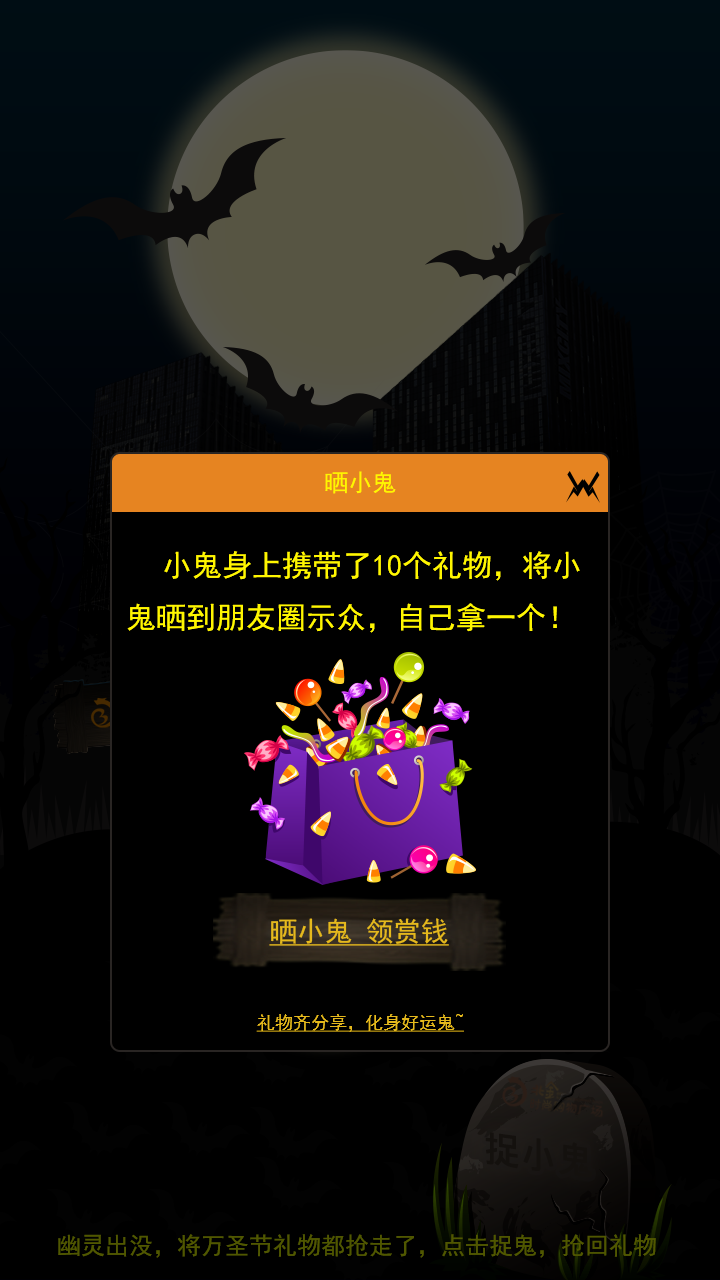
<style>
.page{position:relative;width:720px;height:1280px;background:#000000}
.page>*{position:absolute;margin:0}
.t1{font:24px "SimHei";color:#fff600}
.t2{font:30px "SimHei";color:#fff600}
.t3{font:27.6px "SimHei";color:#e5b91d;text-decoration:underline}
.t4{font:18px "SimHei";color:#e5b91d;text-decoration:underline}
</style>
<div class="page">
<p class="t1" style="left:325px;top:471px;width:71px;height:23px">晒小鬼</p>
<p class="t2" style="left:127px;top:551px;width:453px;height:82px">小鬼身上携带了10个礼物，将小鬼晒到朋友圈示众，自己拿一个！</p>
<p class="t3" style="left:269px;top:918px;width:180px;height:28px">晒小鬼 领赏钱</p>
<p class="t4" style="left:256px;top:1014px;width:208px;height:18px">礼物齐分享，化身好运鬼~</p>
</div>
